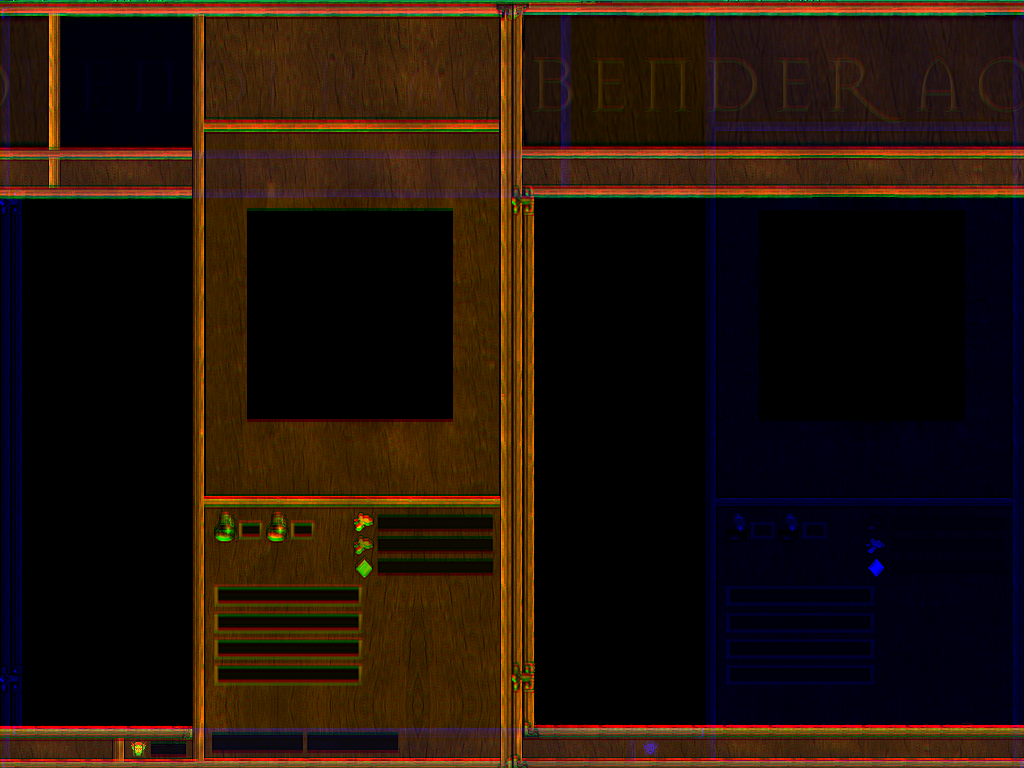
<style>
.page{position:relative;width:1024px;height:768px;background:#000000}
.page>*{position:absolute;margin:0}
.t1{font:81.8px "Mason-Regular";letter-spacing:0.08em;scale:0.95 1}
</style>
<div class="page">
<p class="t1" style="left:21px;top:54px;width:502px;height:66px">BENDER AO</p>
</div>
